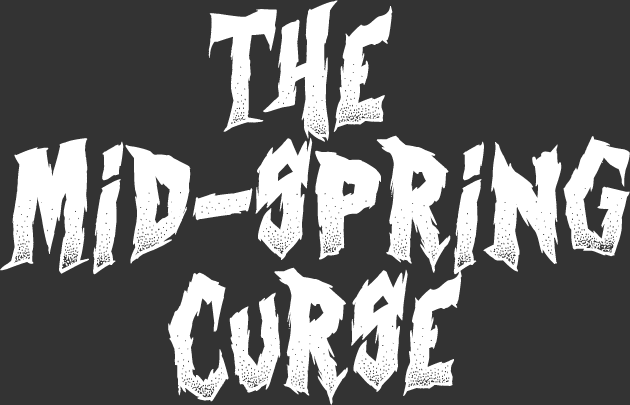
<style>
.page{position:relative;width:630px;height:405px;background:#333333}
.page>*{position:absolute;margin:0}
.t1{font:105px/132px "CurseoftheZombie";letter-spacing:0.025em;color:#ffffff}
</style>
<div class="page">
<p class="t1" style="left:0px;top:0px;width:630px;height:405px;text-align:center">THE <br>MID-SPRING<br>CURSE</p>
</div>
